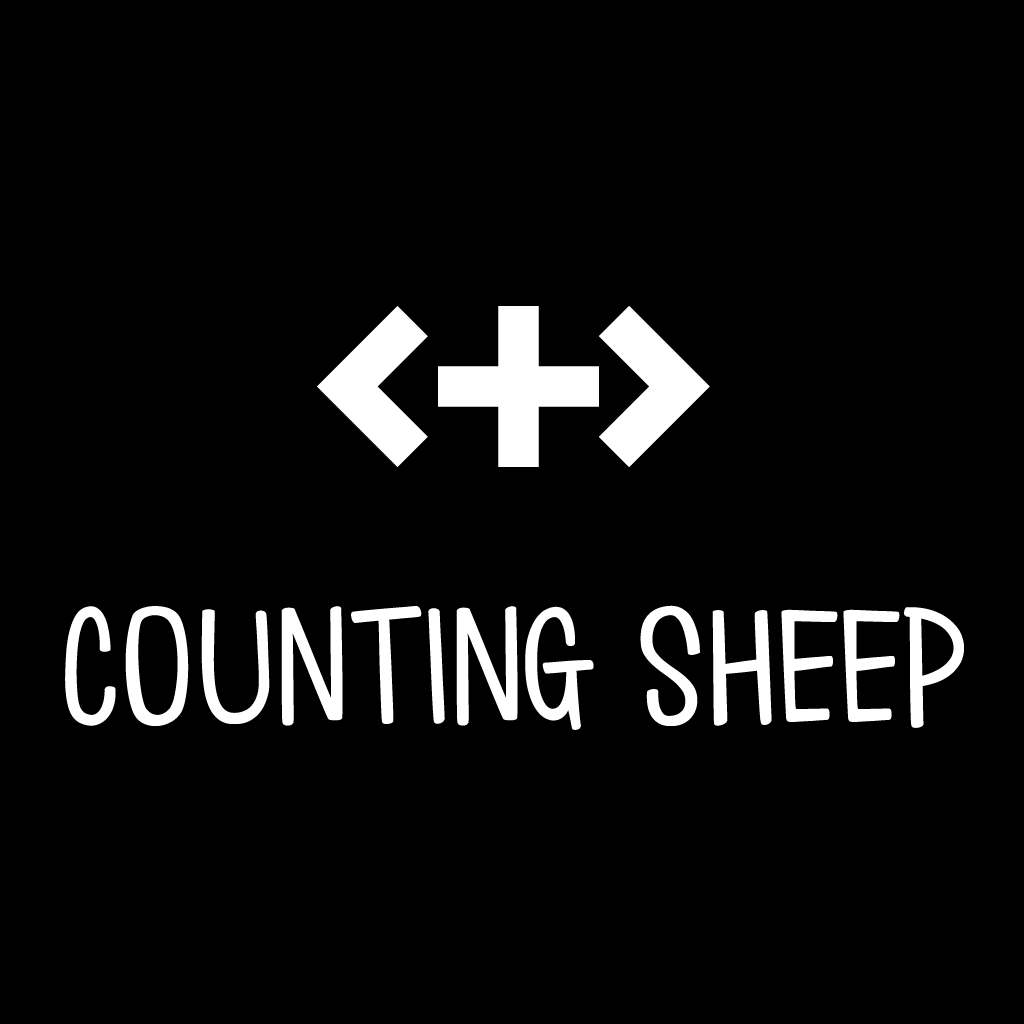
<style>
.page{position:relative;width:1024px;height:1024px;background:#000000}
.page>*{position:absolute;margin:0}
.t1{font:214.1px "Love*Monster";color:#ffffff}
</style>
<div class="page">
<p class="t1" style="left:65px;top:605px;width:899px;height:125px">counting sheep</p>
</div>
